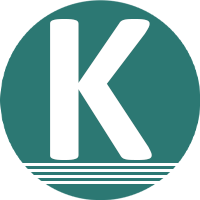
<style>
.page{position:relative;width:200px;height:200px;background:#2c7873}
.page>*{position:absolute;margin:0}
.t1{font:220px "Calibri-Bold";color:#ffffff}
</style>
<div class="page">
<p class="t1" style="left:50px;top:19px;width:102px;height:141px">K</p>
</div>
